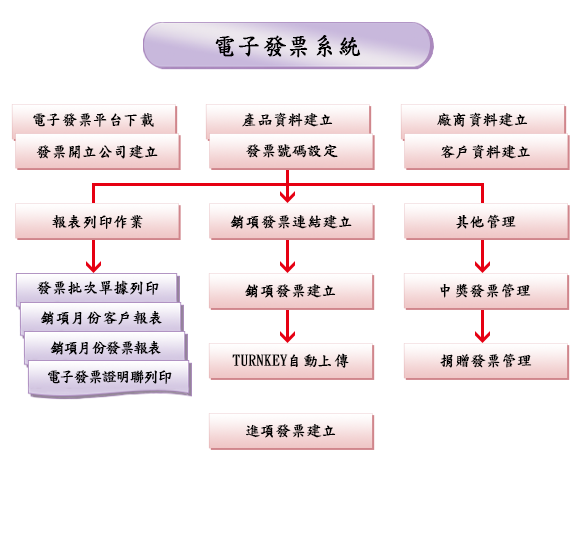
<style>
.page{position:relative;width:577px;height:545px;background:#ffffff}
.page>*{position:absolute;margin:0}
.t1{font:24px "DFKaiShu-SB-Estd-BF";color:#000000;font-weight:bold}
.t2{font:15px "DFKaiShu-SB-Estd-BF";color:#000000;font-weight:bold}
.t3{font:15px "DFKaiShu-SB-Estd-BF";letter-spacing:-0.1em;color:#000000;font-weight:bold}
</style>
<div class="page">
<p class="t1" style="left:215px;top:35px;width:146px;height:23px">電子發票系統</p>
<p class="t2" style="left:33px;top:113px;width:121px;height:14px">電子發票平台下載</p>
<p class="t2" style="left:242px;top:112px;width:91px;height:15px">產品資料建立</p>
<p class="t2" style="left:437px;top:112px;width:91px;height:15px">廠商資料建立</p>
<p class="t2" style="left:36px;top:145px;width:122px;height:14px">發票開立公司建立</p>
<p class="t2" style="left:246px;top:144px;width:92px;height:14px">發票號碼設定</p>
<p class="t2" style="left:441px;top:144px;width:89px;height:15px">客戶資料建立</p>
<p class="t2" style="left:52px;top:215px;width:91px;height:14px">報表列印作業</p>
<p class="t2" style="left:230px;top:215px;width:122px;height:14px">銷項發票連結建立</p>
<p class="t2" style="left:456px;top:214px;width:60px;height:15px">其他管理</p>
<p class="t2" style="left:37px;top:280px;width:122px;height:15px">發票批次單據列印</p>
<p class="t2" style="left:245px;top:284px;width:91px;height:14px">銷項發票建立</p>
<p class="t2" style="left:440px;top:283px;width:91px;height:15px">中獎發票管理</p>
<p class="t2" style="left:41px;top:310px;width:121px;height:15px">銷項月份客戶報表</p>
<p class="t3" style="left:50px;top:341px;width:111px;height:14px">銷項月份發票報表</p>
<p class="t2" style="left:232px;top:353px;width:117px;height:15px">TURNKEY自動上傳</p>
<p class="t2" style="left:440px;top:353px;width:92px;height:15px">捐贈發票管理</p>
<p class="t3" style="left:47px;top:370px;width:125px;height:14px">電子發票證明聯列印</p>
<p class="t2" style="left:246px;top:424px;width:90px;height:14px">進項發票建立</p>
</div>
